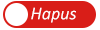
<style>
.page{position:relative;width:100px;height:30px;background:#d91e18}
.page>*{position:absolute;margin:0}
.t1{font:18px "Calibri-Italic";color:#ffffff}
</style>
<div class="page">
<p class="t1" style="left:31px;top:7px;width:45px;height:16px">Hapus</p>
</div>
